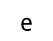
<style>
.page{position:relative;width:53px;height:41px;background:#ffffff}
.page>*{position:absolute;margin:0}
.t1{font:23.7px "DroidSans";color:#000000}
</style>
<div class="page">
<p class="t1" style="left:21px;top:17px;width:11px;height:14px">e</p>
</div>
